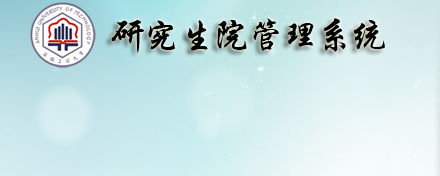
<style>
.page{position:relative;width:440px;height:176px}
.page>*{position:absolute;margin:0}
.t1{font:37.3px "STXingkai";letter-spacing:-0.075em;color:#000000}
</style>
<div class="page">
<p class="t1" style="left:111px;top:18px;width:274px;height:35px">研究生院管理系统</p>
</div>
